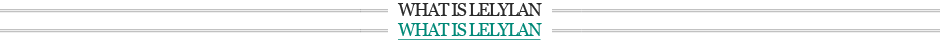
<style>
.page{position:relative;width:940px;height:40px;background:#ffffff}
.page>*{position:absolute;margin:0}
.t1{font:18px "Georgia";letter-spacing:-0.075em;color:#2a2a2a}
.t2{font:18px "Georgia";letter-spacing:-0.075em;color:#008877;text-decoration:underline}
</style>
<div class="page">
<p class="t1" style="left:397px;top:3px;width:145px;height:13px">WHAT IS LELYLAN</p>
<p class="t2" style="left:397px;top:23px;width:145px;height:18px">WHAT IS LELYLAN</p>
</div>
